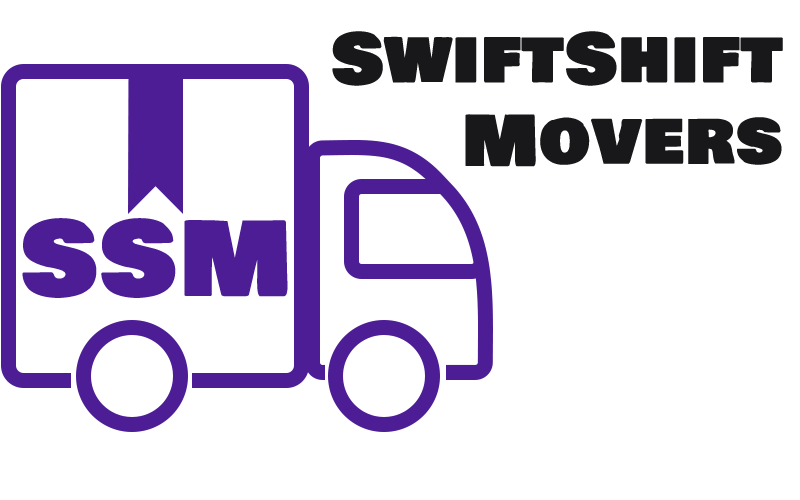
<style>
.page{position:relative;width:800px;height:500px;background:#ffffff}
.page>*{position:absolute;margin:0}
.t1{font:68px "BowlbyOneSC-Regular";color:#18181b;font-weight:bold;scale:1.05 1}
.t2{font:100px "BowlbyOneSC-Regular";color:#4c1d95;font-weight:bold;scale:1.05 1}
</style>
<div class="page">
<p class="t1" style="left:332px;top:31px;width:451px;height:136px;text-align:right">SwiftShift Movers</p>
<p class="t2" style="left:22px;top:218px;width:266px;height:80px">SSM</p>
</div>
